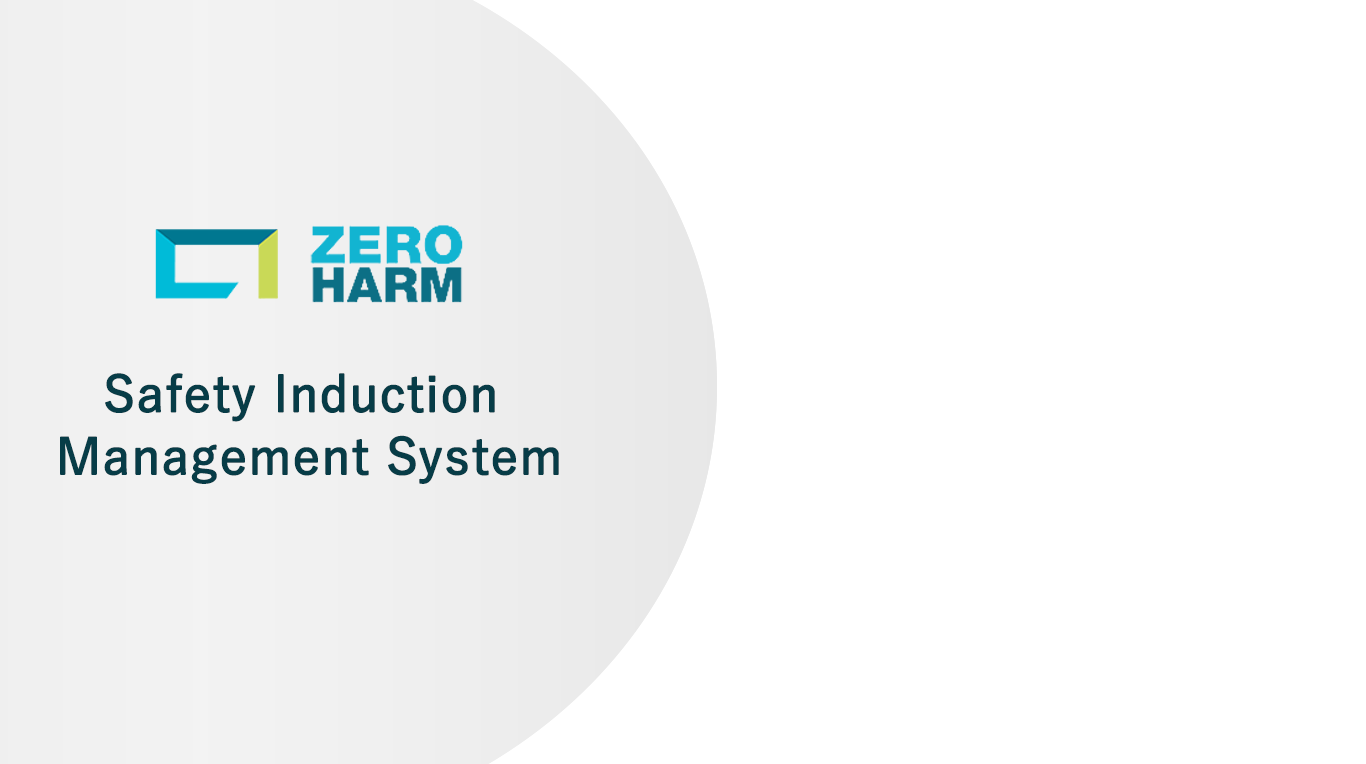
<style>
.page{position:relative;width:1366px;height:764px;background:#ffffff}
.page>*{position:absolute;margin:0}
.t1{font:50px/62.5px "YuGothic-Medium";color:#073c47;font-weight:bold}
</style>
<div class="page">
<p class="t1" style="left:60px;top:373px;width:499px;height:111px;text-align:center">Safety Induction <br>Management System</p>
</div>
